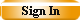
<style>
.page{position:relative;width:80px;height:20px}
.page>*{position:absolute;margin:0}
.t1{font:12px "TimesNewRomanPS-BoldMT";color:#101010}
</style>
<div class="page">
<p class="t1" style="left:22px;top:6px;width:38px;height:12px">Sign In</p>
</div>
